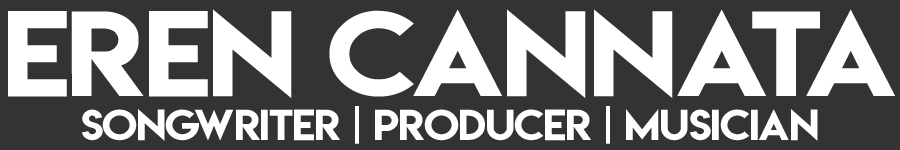
<style>
.page{position:relative;width:900px;height:150px;background:#333333}
.page>*{position:absolute;margin:0}
.t1{font:107.4px "LemonMilk";letter-spacing:-0.025em;color:#ffffff;scale:1.15 1}
.t2{font:38.3px "LemonMilk";letter-spacing:-0.025em;color:#ffffff;scale:1.09 1}
</style>
<div class="page">
<p class="t1" style="left:8px;top:9px;width:887px;height:89px">Eren Cannata</p>
<p class="t2" style="left:82px;top:106px;width:736px;height:38px">Songwriter | Producer | Musician</p>
</div>
